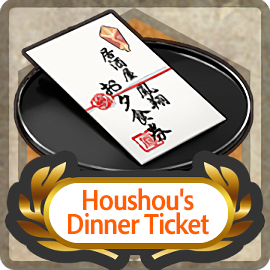
<style>
.page{position:relative;width:270px;height:270px}
.page>*{position:absolute;margin:0}
.t1{font:30px/24px "AdobeClean-Bold";letter-spacing:-0.04em;color:#ff5d00;scale:0.9 1}
</style>
<div class="page">
<p class="t1" style="left:68px;top:188px;width:141px;height:47px;text-align:center">Houshou's<br>Dinner Ticket</p>
</div>
